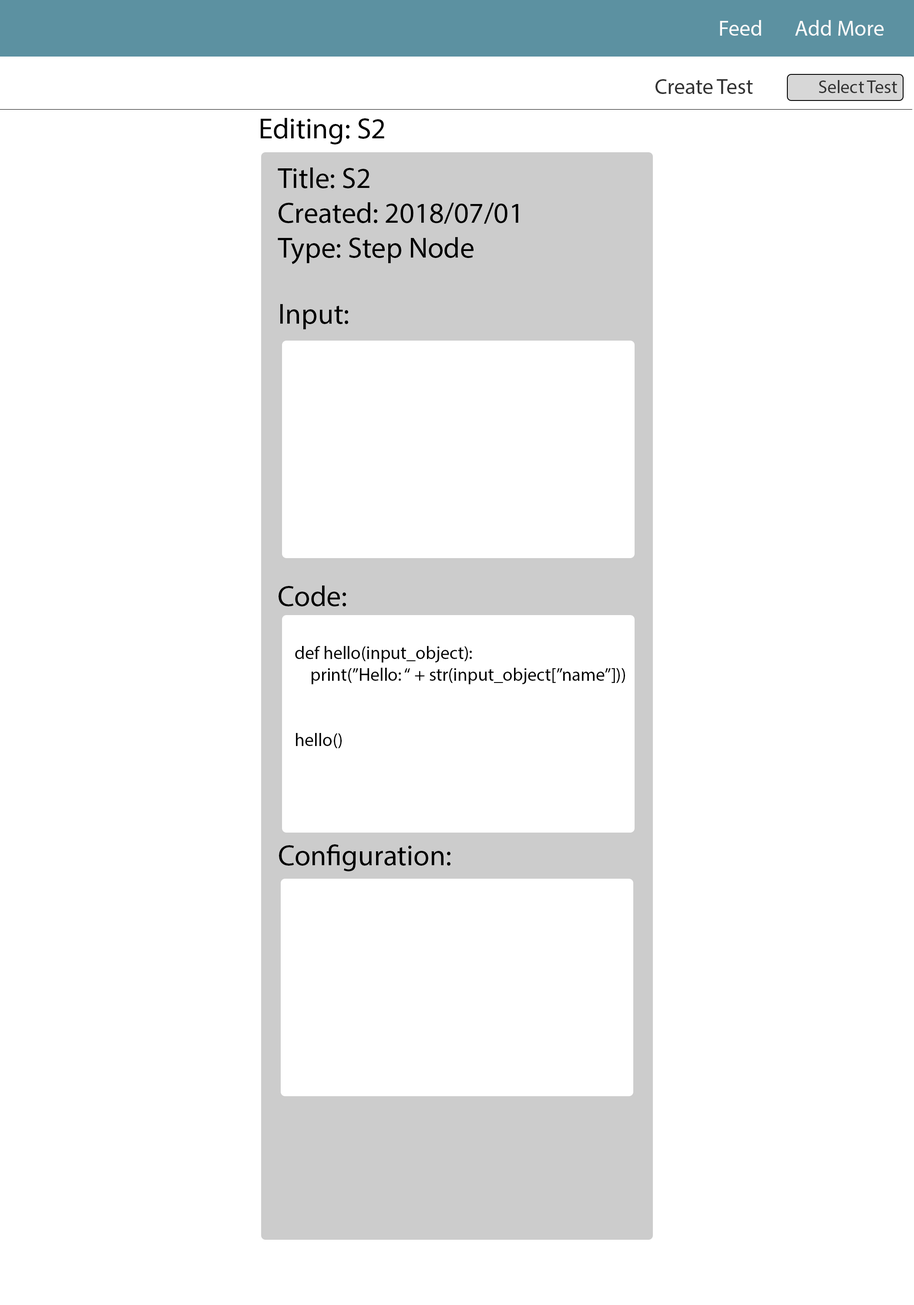
<style>
.page{position:relative;width:914px;height:1305px;background:#ffffff}
.page>*{position:absolute;margin:0}
.t1{font:21.8px "MyriadPro-Regular";color:#fbfbfb}
.t2{font:5.2px "MyriadPro-Regular";color:#333333}
.t3{font:18.1px "MyriadPro-Regular";color:#333333}
.t4{font:29px "MyriadPro-Regular";color:#000000}
.t5{font:18.1px "MyriadPro-Regular";color:#000000}
</style>
<div class="page">
<p class="t1" style="left:720px;top:20px;width:41px;height:16px">Feed</p>
<p class="t1" style="left:795px;top:20px;width:89px;height:16px">Add More</p>
<p class="t2" style="left:655px;top:79px;width:98px;height:15px">Create Test</p>
<p class="t3" style="left:818px;top:80px;width:79px;height:13px">Select Test</p>
<p class="t4" style="left:261px;top:118px;width:123px;height:26px">Editing: S2</p>
<p class="t4" style="left:278px;top:167px;width:240px;height:97px">Title: S2<br>Created: 2018/07/01<br>Type: Step Node</p>
<p class="t4" style="left:280px;top:304px;width:68px;height:25px">Input:</p>
<p class="t4" style="left:278px;top:586px;width:68px;height:20px">Code:</p>
<p class="t5" style="left:295px;top:646px;width:330px;height:102px">def hello(input_object):<br> print(”Hello: “ + str(input_object[”name”]))<br><br><br>hello()</p>
<p class="t4" style="left:279px;top:844px;width:171px;height:27px">Configuration:</p>
</div>
